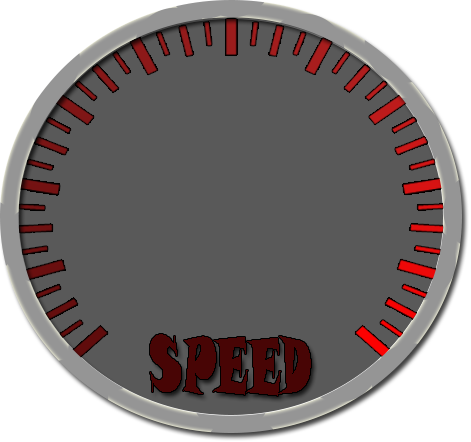
<style>
.page{position:relative;width:471px;height:442px;background:#595959}
.page>*{position:absolute;margin:0}
.t1{font:77.2px "SnapITC-Regular";color:#480505;scale:0.52 1}
</style>
<div class="page">
<p class="t1" style="left:150px;top:334px;width:161px;height:62px;rotate:1deg">SPEED</p>
</div>
